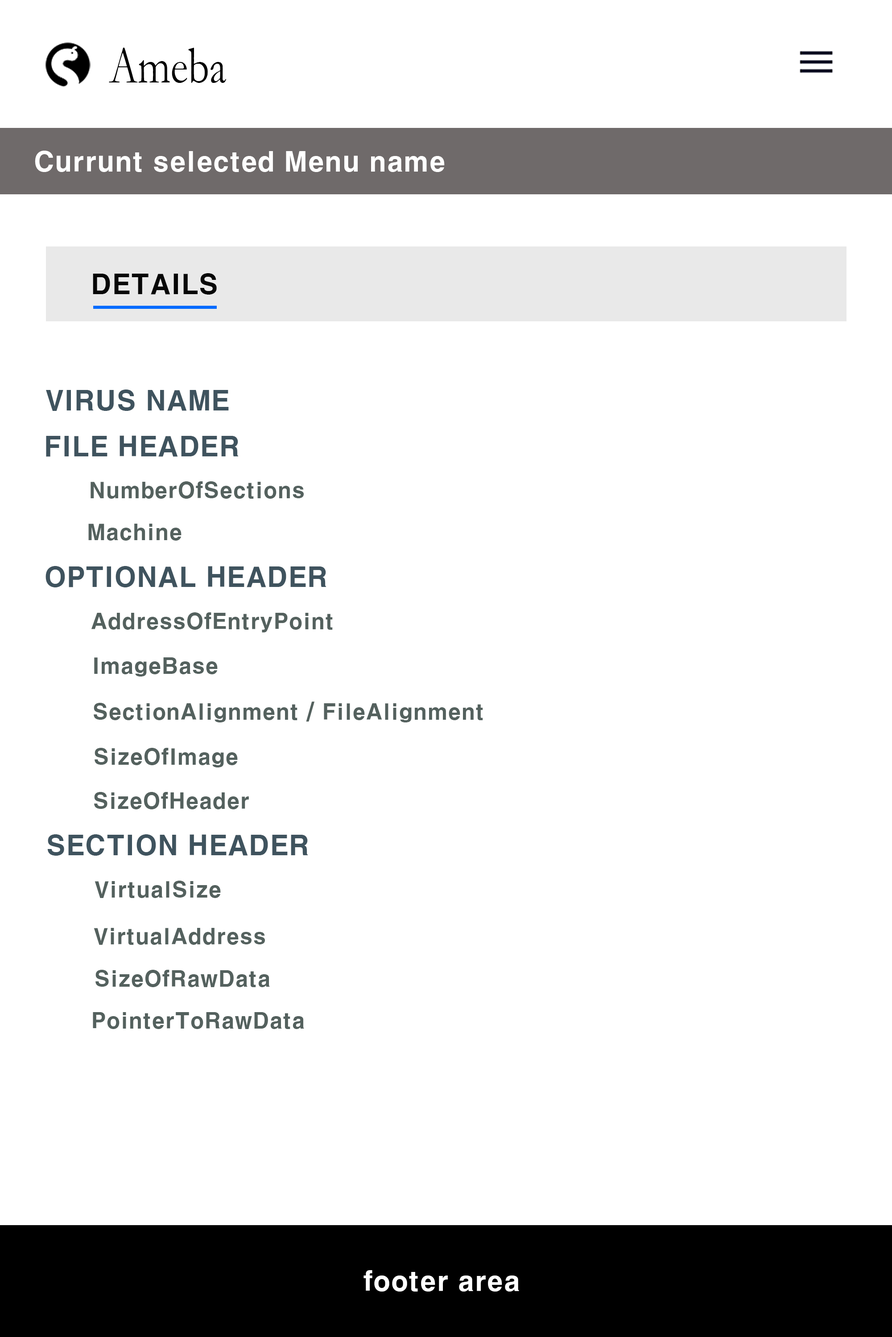
<style>
.page{position:relative;width:892px;height:1337px;background:#ffffff}
.page>*{position:absolute;margin:0}
.t1{font:52.9px "Garamond";color:#000000;scale:0.8 1}
.t2{font:26.7px "H2gtrE";color:#ffffff}
.t3{font:26.7px "H2gtrE";color:#070707}
.t4{font:26.7px "H2gtrE";color:#3f535e;text-transform:uppercase}
.t5{font:21.4px "H2gtrE";color:#54615e}
</style>
<div class="page">
<p class="t1" style="left:109px;top:48px;width:117px;height:35px">Ameba</p>
<p class="t2" style="left:35px;top:151px;width:409px;height:21px">Currunt selected Menu name</p>
<p class="t3" style="left:93px;top:273px;width:124px;height:22px">DETAILS</p>
<p class="t4" style="left:46px;top:390px;width:183px;height:21px">virus name</p>
<p class="t4" style="left:46px;top:436px;width:193px;height:21px">FILE HEADER</p>
<p class="t5" style="left:90px;top:481px;width:214px;height:18px">NumberOfSections</p>
<p class="t5" style="left:88px;top:524px;width:93px;height:17px">Machine</p>
<p class="t4" style="left:45px;top:566px;width:281px;height:22px">Optional Header</p>
<p class="t5" style="left:91px;top:613px;width:242px;height:20px">AddressOfEntryPoint</p>
<p class="t5" style="left:94px;top:658px;width:124px;height:19px">ImageBase</p>
<p class="t5" style="left:94px;top:702px;width:389px;height:21px">SectionAlignment / FileAlignment</p>
<p class="t5" style="left:95px;top:748px;width:143px;height:20px">SizeOfImage</p>
<p class="t5" style="left:94px;top:792px;width:155px;height:18px">SizeOfHeader</p>
<p class="t4" style="left:47px;top:835px;width:261px;height:21px">Section Header</p>
<p class="t5" style="left:95px;top:881px;width:126px;height:17px">VirtualSize</p>
<p class="t5" style="left:94px;top:928px;width:171px;height:17px">VirtualAddress</p>
<p class="t5" style="left:95px;top:970px;width:175px;height:17px">SizeOfRawData</p>
<p class="t5" style="left:93px;top:1012px;width:211px;height:17px">PointerToRawData</p>
<p class="t2" style="left:363px;top:1271px;width:156px;height:21px">footer area</p>
</div>
